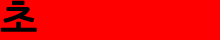
<style>
.page{position:relative;width:220px;height:40px;background:#ff0000}
.page>*{position:absolute;margin:0}
.t1{font:39.7px "NanumGothicBold";color:#000000}
</style>
<div class="page">
<p class="t1" style="left:0px;top:0px;width:37px;height:32px">초</p>
</div>
